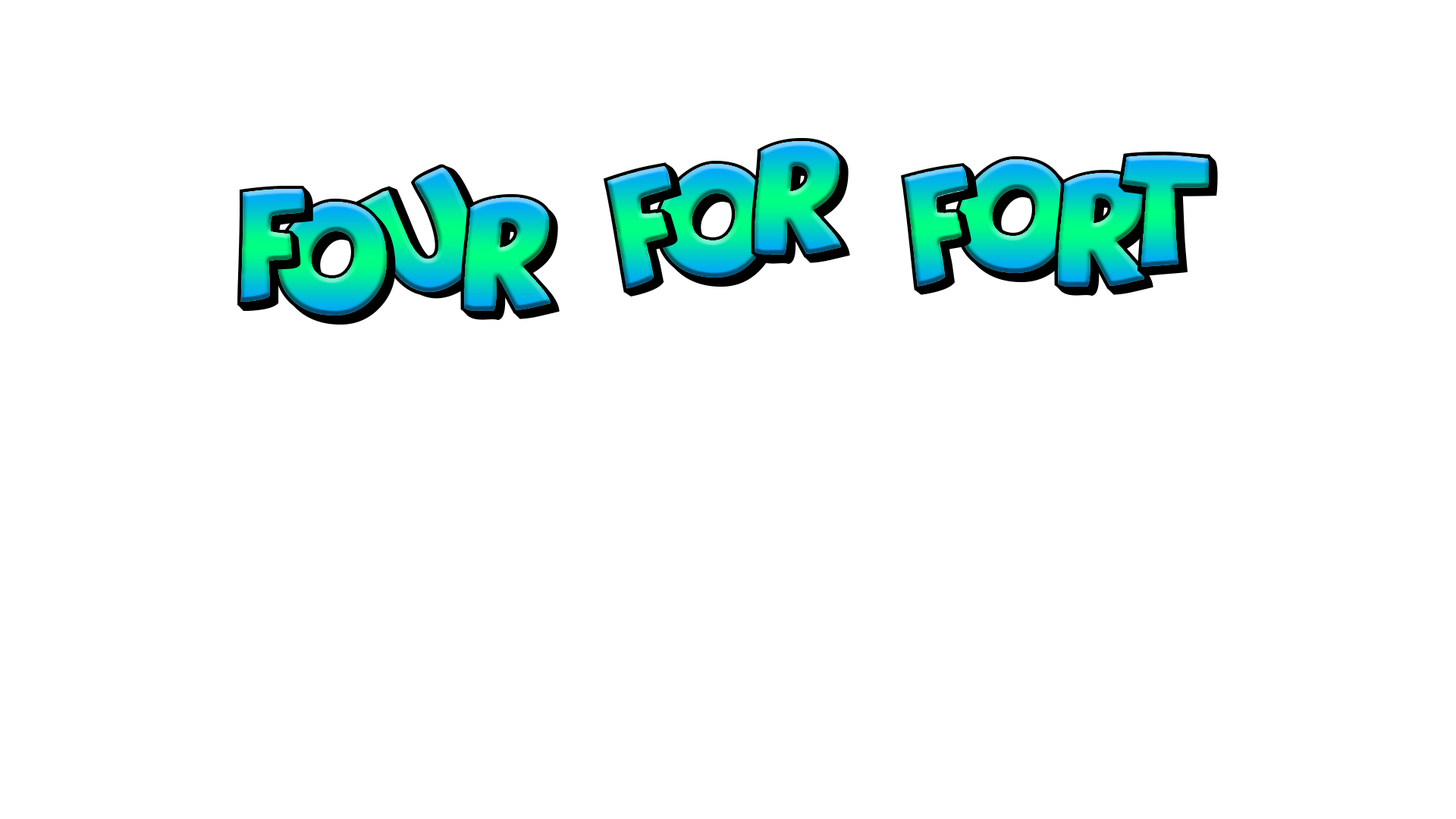
<style>
.page{position:relative;width:1456px;height:819px;background:#ffffff}
.page>*{position:absolute;margin:0}
.t1{font:113.7px "AgentOrange";color:#000000}
</style>
<div class="page">
<p class="t1" style="left:751px;top:138px;width:99px;height:126px">R</p>
<p class="t1" style="left:654px;top:161px;width:123px;height:126px">o</p>
<p class="t1" style="left:955px;top:156px;width:122px;height:126px">o</p>
<p class="t1" style="left:1118px;top:152px;width:100px;height:124px">T</p>
<p class="t1" style="left:355px;top:164px;width:130px;height:135px;rotate:-24deg">u</p>
<p class="t1" style="left:603px;top:162px;width:79px;height:135px;rotate:-11deg">F</p>
<p class="t1" style="left:901px;top:163px;width:77px;height:132px;rotate:-8deg">F</p>
<p class="t1" style="left:1054px;top:170px;width:99px;height:126px">R</p>
<p class="t1" style="left:237px;top:186px;width:76px;height:125px">F</p>
<p class="t1" style="left:460px;top:194px;width:100px;height:126px">R</p>
<p class="t1" style="left:274px;top:199px;width:122px;height:126px">o</p>
</div>
